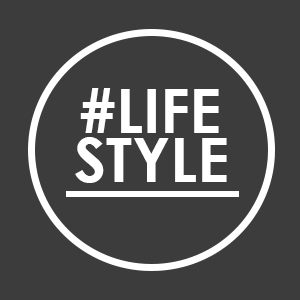
<style>
.page{position:relative;width:300px;height:300px;background:#3c3c3c}
.page>*{position:absolute;margin:0}
.t1{font:61.3px "CenturyGothic-Bold";color:#ffffff}
</style>
<div class="page">
<p class="t1" style="left:80px;top:88px;width:139px;height:45px">#LIFE</p>
<p class="t1" style="left:75px;top:137px;width:152px;height:46px">STYLE</p>
</div>
